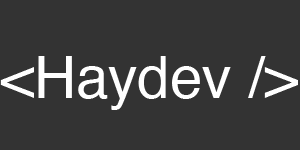
<style>
.page{position:relative;width:300px;height:150px;background:#333333}
.page>*{position:absolute;margin:0}
.t1{font:58.3px "Helvetica";color:#ffffff}
</style>
<div class="page">
<p class="t1" style="left:0px;top:56px;width:298px;height:54px">&lt;Haydev /&gt;</p>
</div>
